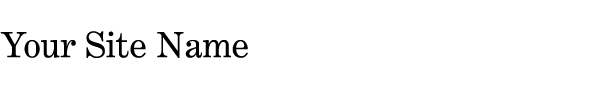
<style>
.page{position:relative;width:616px;height:89px;background:#ffffff}
.page>*{position:absolute;margin:0}
.t1{font:35px "CenturyExpandedLTStd";color:#000000}
</style>
<div class="page">
<p class="t1" style="left:0px;top:31px;width:248px;height:27px">Your Site Name</p>
</div>
